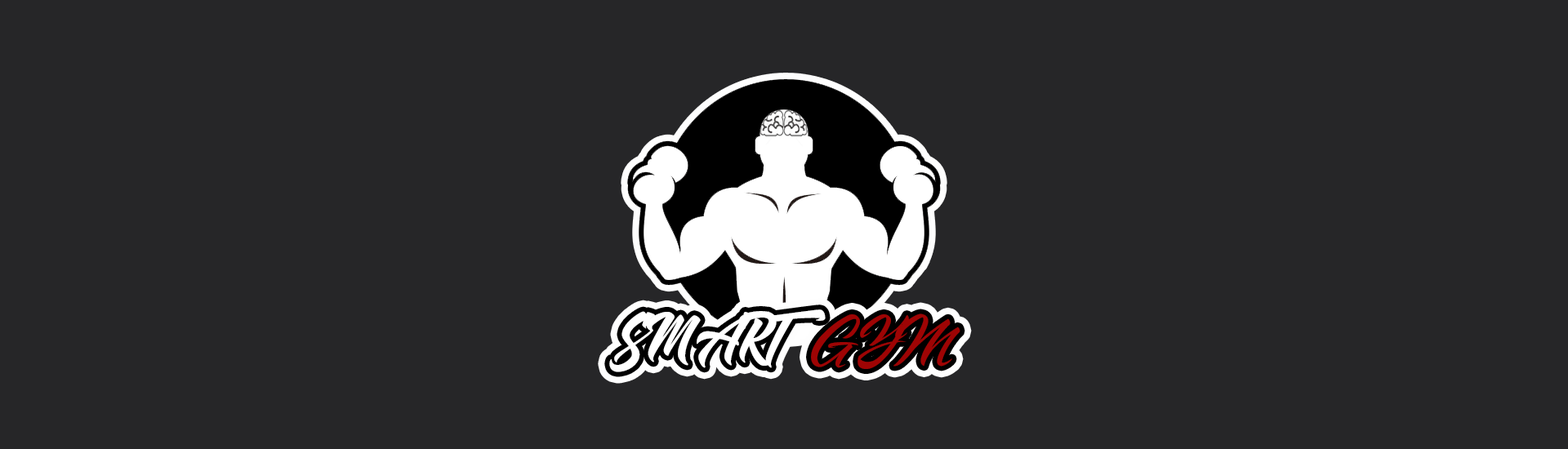
<style>
.page{position:relative;width:1568px;height:449px;background:#262628}
.page>*{position:absolute;margin:0}
.t1{font:65.3px "ShandersFree";color:#ffffff}
.t2{font:65.3px "StripedKingClean";color:#9e0404}
</style>
<div class="page">
<p class="t1" style="left:609px;top:310px;width:351px;height:62px">SMART  <span class="t2">GYM</span></p>
</div>
